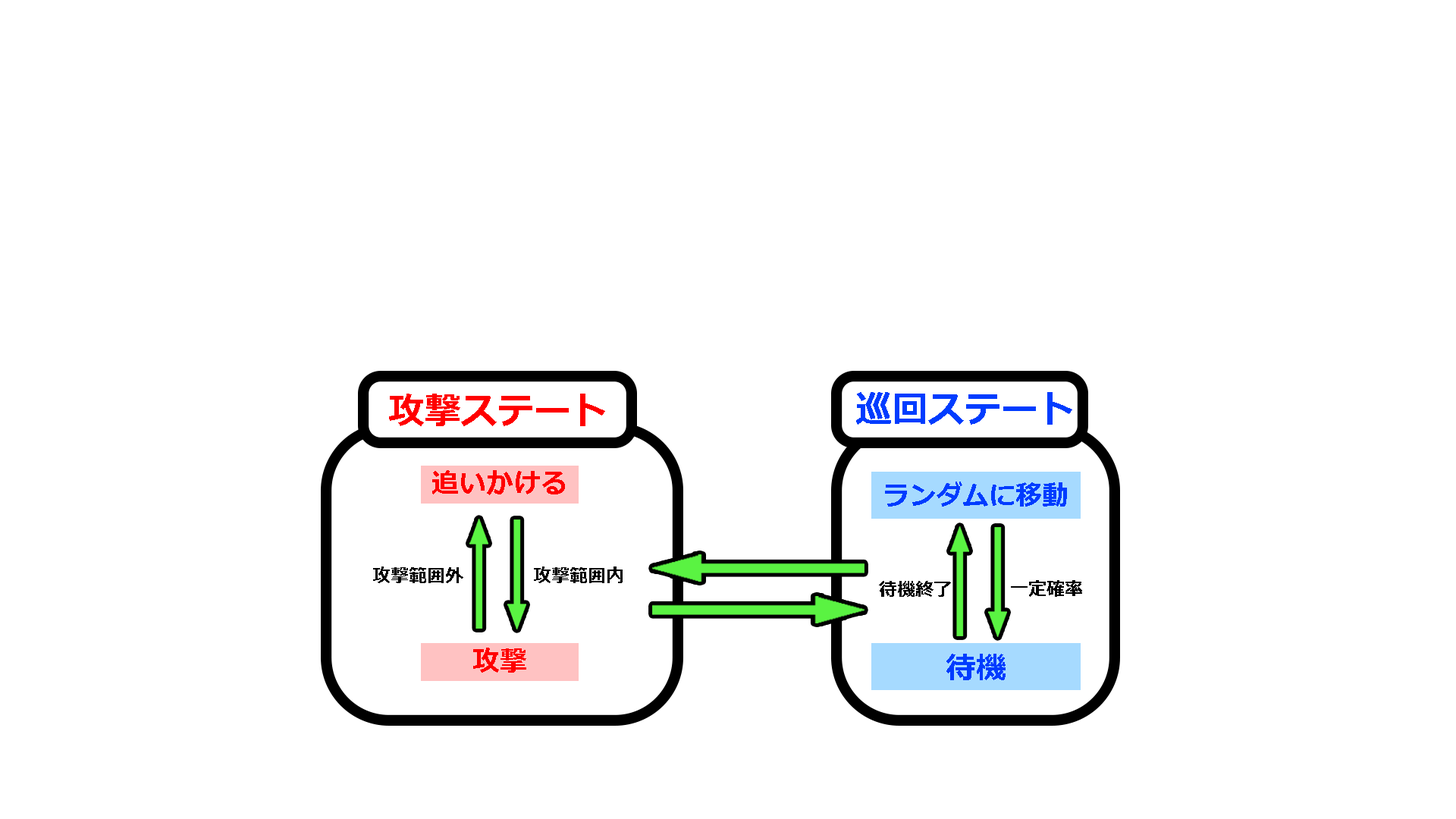
<style>
.page{position:relative;width:1456px;height:819px;background:#ffffff}
.page>*{position:absolute;margin:0}
.t1{font:36.4px "Meiryo-Bold";color:#ff0000}
.t2{font:36.4px "Meiryo-Bold";color:#003cff}
.t3{font:27.3px "Meiryo-Bold";color:#ff0000}
.t4{font:26.6px "Meiryo-Bold";color:#003cff}
.t5{font:18.2px "Meiryo-Bold";color:#000000}
.t6{font:30.5px "Meiryo-Bold";color:#003cff}
</style>
<div class="page">
<p class="t1" style="left:389px;top:394px;width:216px;height:32px">攻撃ステート</p>
<p class="t2" style="left:856px;top:392px;width:216px;height:33px">巡回ステート</p>
<p class="t3" style="left:432px;top:470px;width:133px;height:25px">追いかける</p>
<p class="t4" style="left:885px;top:482px;width:182px;height:25px">ランダムに移動</p>
<p class="t5" style="left:373px;top:566px;width:90px;height:17px">攻撃範囲外</p>
<p class="t5" style="left:534px;top:566px;width:89px;height:17px">攻撃範囲内</p>
<p class="t5" style="left:879px;top:581px;width:72px;height:16px">待機終了</p>
<p class="t5" style="left:1011px;top:580px;width:71px;height:17px">一定確率</p>
<p class="t3" style="left:473px;top:648px;width:53px;height:25px">攻撃</p>
<p class="t6" style="left:946px;top:654px;width:60px;height:26px">待機</p>
</div>
